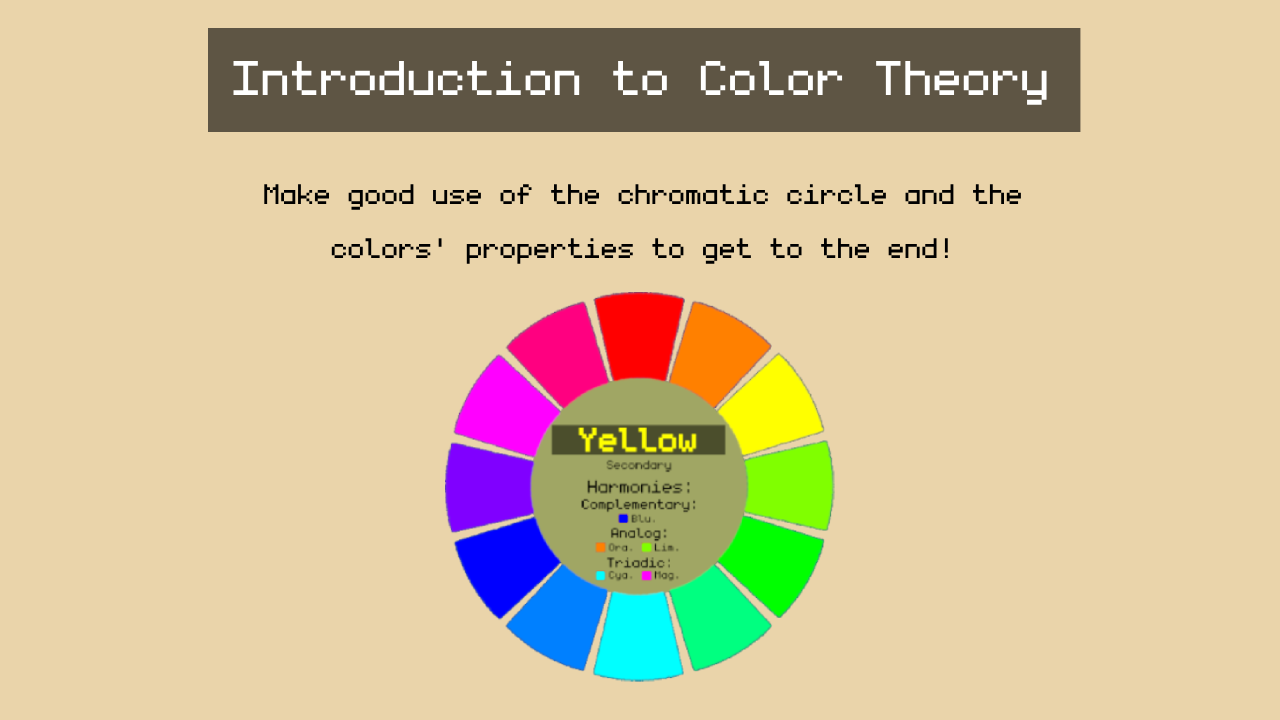
<style>
.page{position:relative;width:1280px;height:720px;background:#ead4aa}
.page>*{position:absolute;margin:0}
.t1{font:77.9px "monogram";color:#ffffff}
.t2{font:45px "monogram";color:#000000}
</style>
<div class="page">
<p class="t1" style="left:233px;top:61px;width:814px;height:44px">Introduction to Color Theory</p>
<p class="t2" style="left:264px;top:184px;width:757px;height:80px;text-align:center">Make good use of the chromatic circle and the<br>colors' properties to get to the end!</p>
</div>
